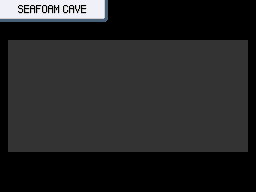
<style>
.page{position:relative;width:256px;height:192px;background:#333333}
.page>*{position:absolute;margin:0}
.t1{font:12px "PowerClear-Regular"}
.t2{font:12px "PowerClear-Regular";color:#000000}
</style>
<div class="page">
<p class="t1" style="left:18px;top:6px;width:68px;height:8px">SEAFOAM CAVE</p>
<p class="t2" style="left:18px;top:5px;width:68px;height:8px">SEAFOAM CAVE</p>
</div>
